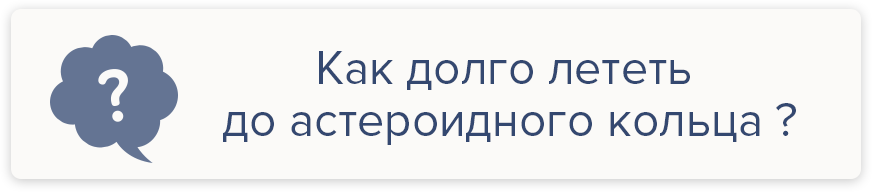
<style>
.page{position:relative;width:872px;height:192px;background:#fbfaf8}
.page>*{position:absolute;margin:0}
.t1{font:48px/52px "ProximaNova-Regular";color:#344870}
</style>
<div class="page">
<p class="t1" style="left:223px;top:51px;width:573px;height:94px;text-align:center">Как долго лететь <br>до астероидного кольца ?</p>
</div>
